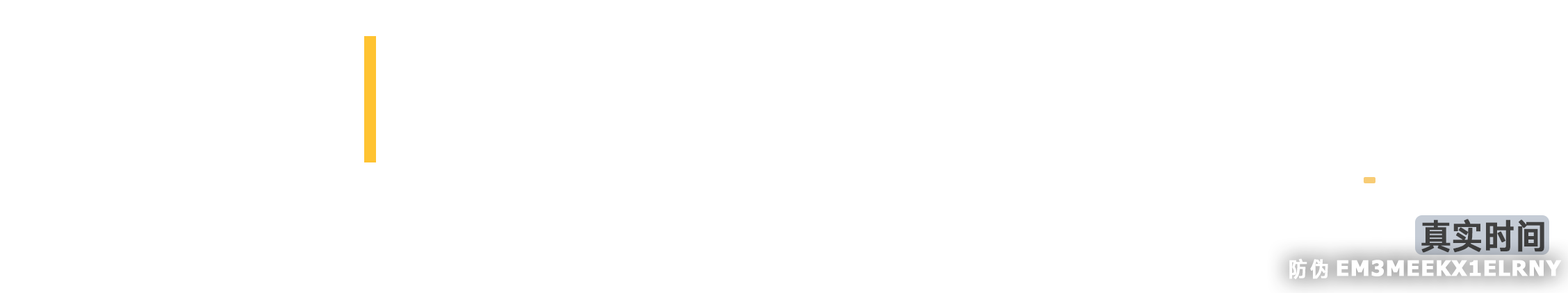
<style>
.page{position:relative;width:1568px;height:293px;background:#ffffff}
.page>*{position:absolute;margin:0}
.t1{font:35.2px "HYQiHeiX2-FEW";color:#404040;font-weight:bold}
.t2{font:21.8px "HYQiHeiX2-FEW";letter-spacing:0.1em;color:#ffffff;font-weight:bold}
.t3{font:21.4px "Tahoma-Bold";letter-spacing:0.04em;color:#ffffff;font-weight:bold}
</style>
<div class="page">
<p class="t1" style="left:1421px;top:219px;width:123px;height:34px">真实时间</p>
<p class="t2" style="left:1289px;top:259px;width:39px;height:20px">防伪</p>
<p class="t3" style="left:1337px;top:260px;width:225px;height:17px">EM3MEEKX1ELRNY</p>
</div>
